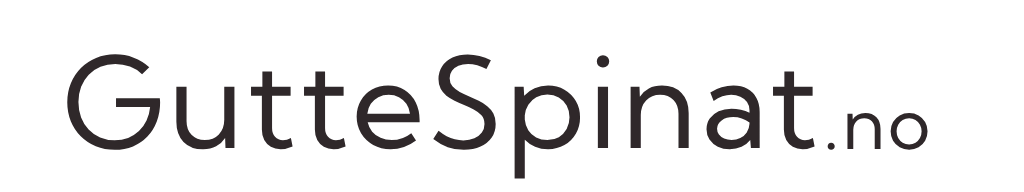
<style>
.page{position:relative;width:1024px;height:192px;background:#ffffff}
.page>*{position:absolute;margin:0}
.t1{font:125.3px "KumbhSans-Regular";letter-spacing:0.024em;color:#2f282a}
.t2{font:72.3px "KumbhSans-Regular";letter-spacing:0.034em;color:#2f282a}
</style>
<div class="page">
<p class="t1" style="left:67px;top:54px;width:748px;height:125px">GutteSpinat</p>
<p class="t2" style="left:827px;top:112px;width:101px;height:38px">.no</p>
</div>
